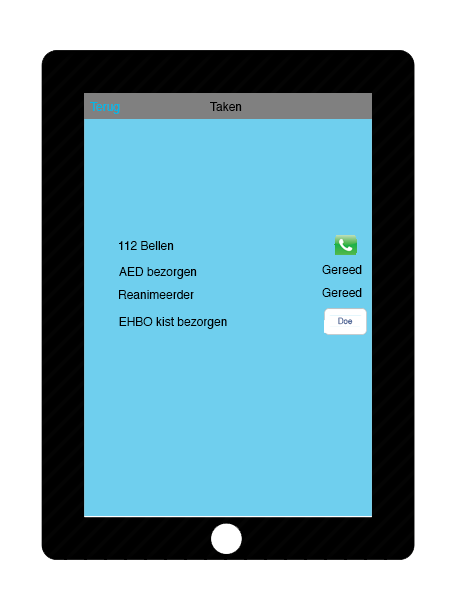
<style>
.page{position:relative;width:451px;height:599px;background:#6fcfee}
.page>*{position:absolute;margin:0}
.t1{font:12px "Helvetica";color:#00b7e7}
.t2{font:12px "Helvetica";color:#000000}
.t3{font:8.5px "Helvetica";color:#456094;scale:0.93 1}
</style>
<div class="page">
<p class="t1" style="left:90px;top:102px;width:30px;height:12px">Terug</p>
<p class="t2" style="left:210px;top:102px;width:32px;height:9px">Taken</p>
<p class="t2" style="left:119px;top:241px;width:55px;height:9px">112 Bellen</p>
<p class="t2" style="left:119px;top:267px;width:78px;height:12px">AED bezorgen</p>
<p class="t2" style="left:322px;top:265px;width:40px;height:9px">Gereed</p>
<p class="t2" style="left:119px;top:290px;width:75px;height:9px">Reanimeerder</p>
<p class="t2" style="left:322px;top:288px;width:40px;height:9px">Gereed</p>
<p class="t2" style="left:119px;top:317px;width:108px;height:12px">EHBO kist bezorgen</p>
<p class="t3" style="left:338px;top:317px;width:15px;height:8px">Doe</p>
</div>
